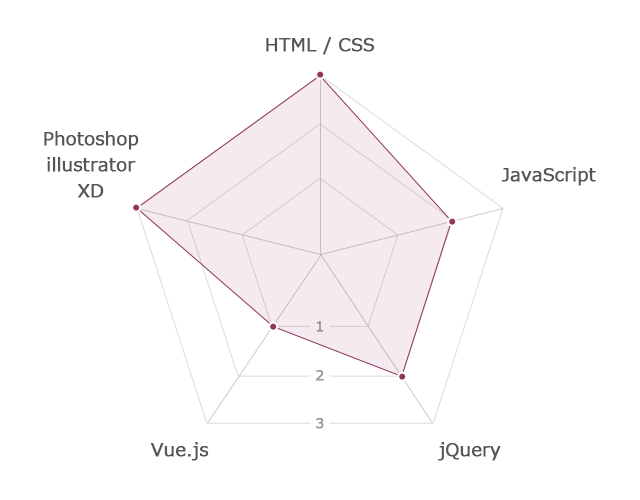
<style>
.page{position:relative;width:640px;height:500px;background:#ffffff}
.page>*{position:absolute;margin:0}
.t1{font:18px "Meiryo";color:#555555;font-weight:bold}
.t2{font:18px/26px "Meiryo";color:#555555;font-weight:bold}
.t3{font:14px "Meiryo";color:#999999;font-weight:bold}
</style>
<div class="page">
<p class="t1" style="left:266px;top:37px;width:109px;height:18px">HTML / CSS</p>
<p class="t2" style="left:44px;top:131px;width:95px;height:67px;text-align:center">Photoshop<br>illustrator<br>XD</p>
<p class="t1" style="left:501px;top:167px;width:95px;height:19px">JavaScript</p>
<p class="t3" style="left:316px;top:321px;width:8px;height:11px">1</p>
<p class="t3" style="left:316px;top:370px;width:8px;height:11px">2</p>
<p class="t3" style="left:316px;top:418px;width:8px;height:11px">3</p>
<p class="t1" style="left:150px;top:442px;width:59px;height:19px">Vue.js</p>
<p class="t1" style="left:438px;top:442px;width:63px;height:19px">jQuery</p>
</div>
